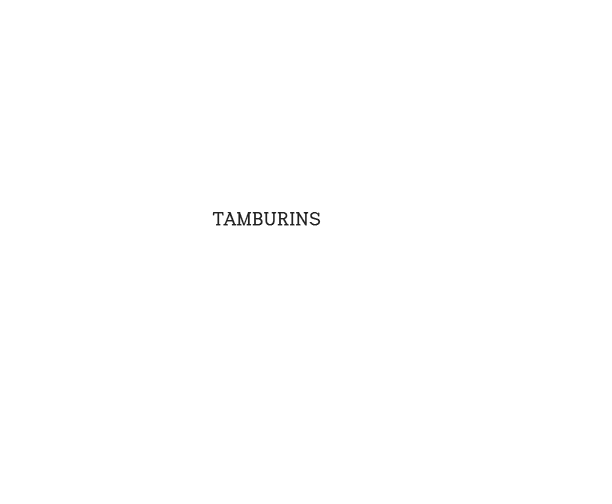
<style>
.page{position:relative;width:612px;height:504px;background:#ffffff}
.page>*{position:absolute;margin:0}
.t1{font:18px "HCRBatang";color:#222222;font-weight:bold}
</style>
<div class="page">
<p class="t1" style="left:212px;top:212px;width:109px;height:14px">TAMBURINS</p>
</div>
